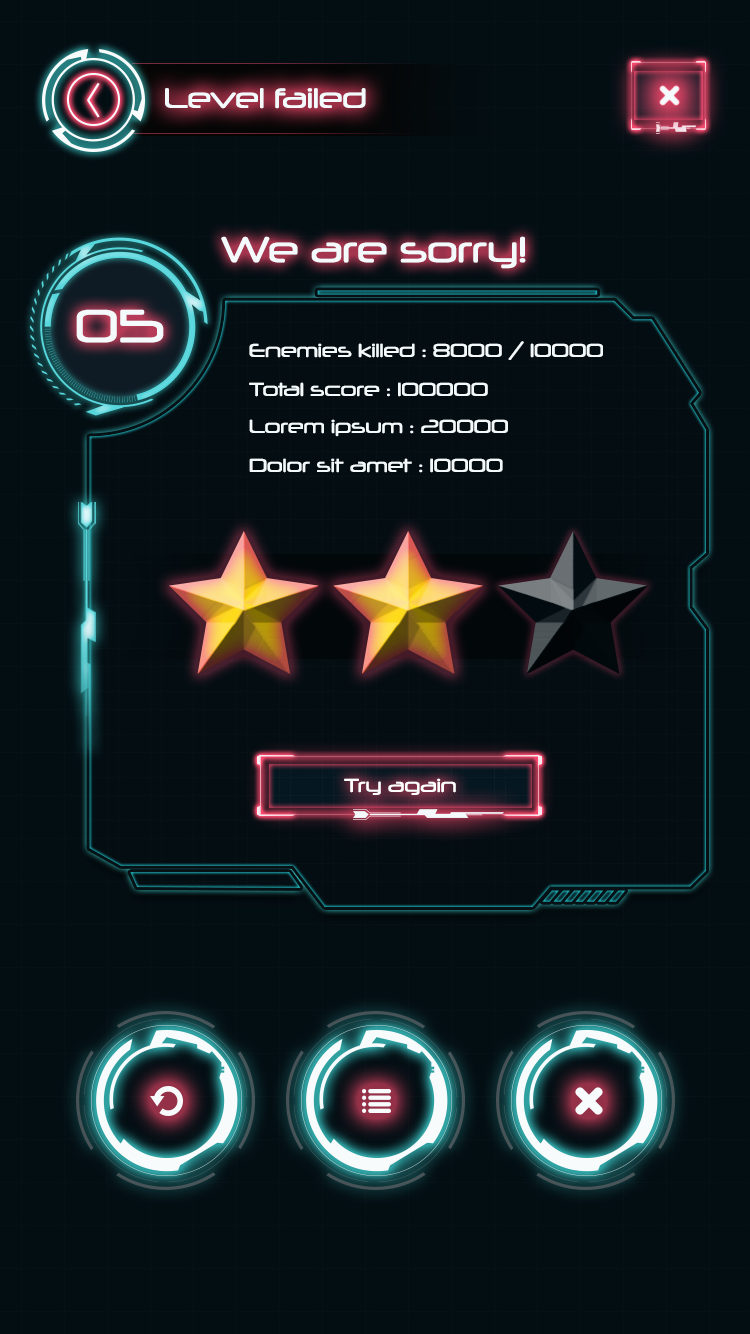
<style>
.page{position:relative;width:750px;height:1334px;background:#030e13}
.page>*{position:absolute;margin:0}
.t1{font:27.2px "Neuropol-Regular";color:#f4fafc}
.t2{font:35px "Neuropol-Regular";color:#f4fafc}
.t3{font:45.1px "Neuropol-Regular";color:#f4fafc}
.t4{font:18.1px "Neuropol-Regular";color:#f4fafc}
.t5{font:18.1px "Neuropol-Regular";color:#ffffff}
</style>
<div class="page">
<p class="t1" style="left:165px;top:88px;width:201px;height:21px">Level failed</p>
<p class="t2" style="left:221px;top:236px;width:305px;height:33px">We are sorry!</p>
<p class="t3" style="left:76px;top:309px;width:88px;height:34px">05</p>
<p class="t4" style="left:249px;top:341px;width:354px;height:19px">Enemies killed : 8000 / 10000</p>
<p class="t4" style="left:249px;top:382px;width:239px;height:15px">Total score : 100000</p>
<p class="t4" style="left:249px;top:419px;width:259px;height:18px">Lorem ipsum : 20000</p>
<p class="t4" style="left:249px;top:458px;width:254px;height:15px">Dolor sit amet : 10000</p>
<p class="t5" style="left:344px;top:778px;width:112px;height:17px">Try again</p>
</div>
